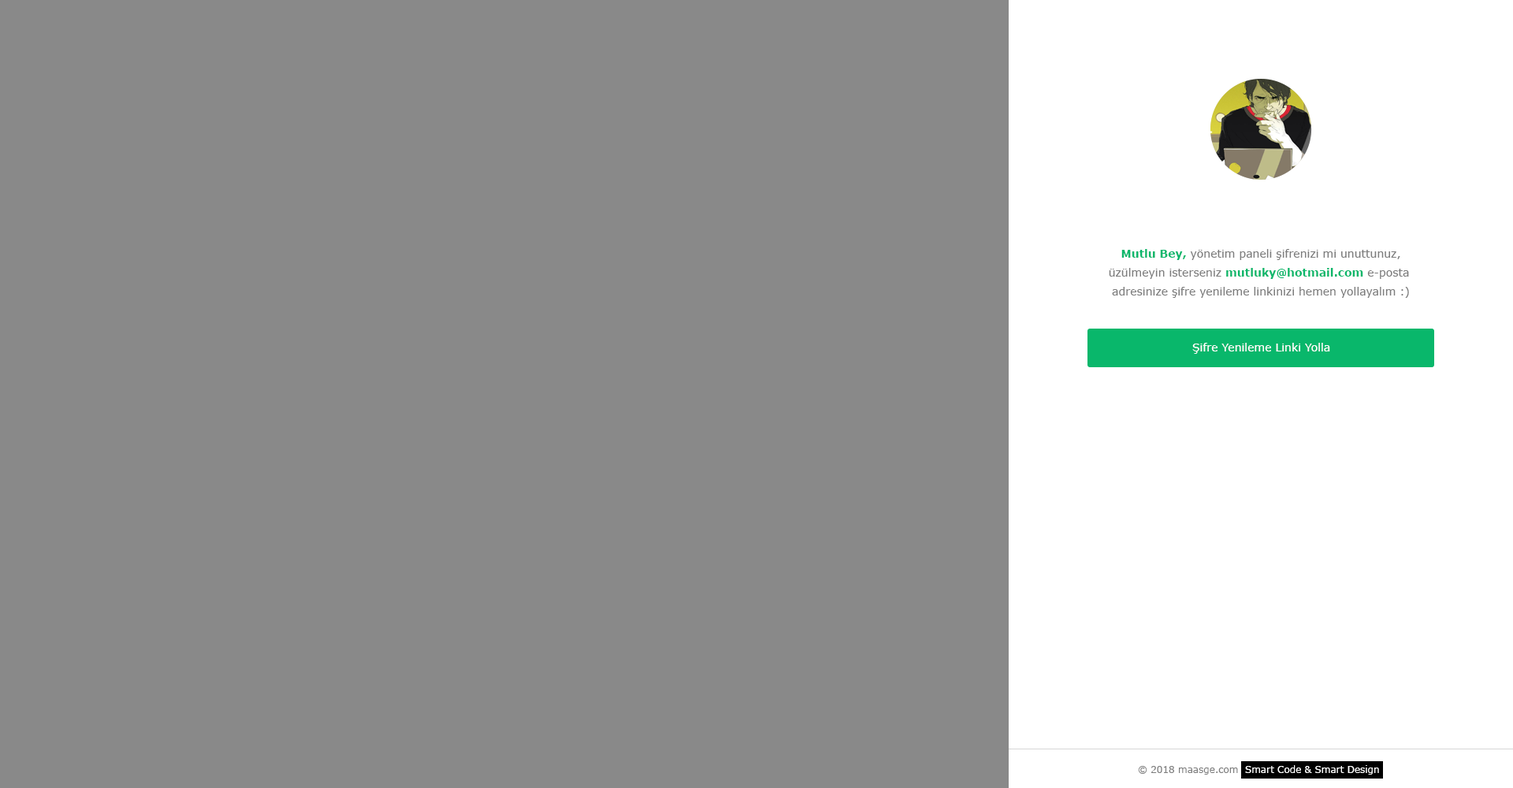
<style>
.page{position:relative;width:1513px;height:788px;background:#898989}
.page>*{position:absolute;margin:0}
.t1{font:11px/18.9px "Verdana";color:#7d7d7d}
.t2{font:11px/18.9px "Verdana-Bold";color:#09b76b}
.t3{font:11px "Verdana";color:#ffffff}
</style>
<div class="page">
<p class="t1" style="left:1109px;top:249px;width:300px;height:49px;text-align:center"><span class="t2">Mutlu Bey, </span>yönetim paneli şifrenizi mi unuttunuz,<br>üzülmeyin isterseniz <span class="t2">mutluky@hotmail.com</span> e-posta <br>adresinize şifre yenileme linkinizi hemen yollayalım :)</p>
<p class="t3" style="left:1192px;top:343px;width:138px;height:11px">Şifre Yenileme Linki Yolla</p>
</div>
